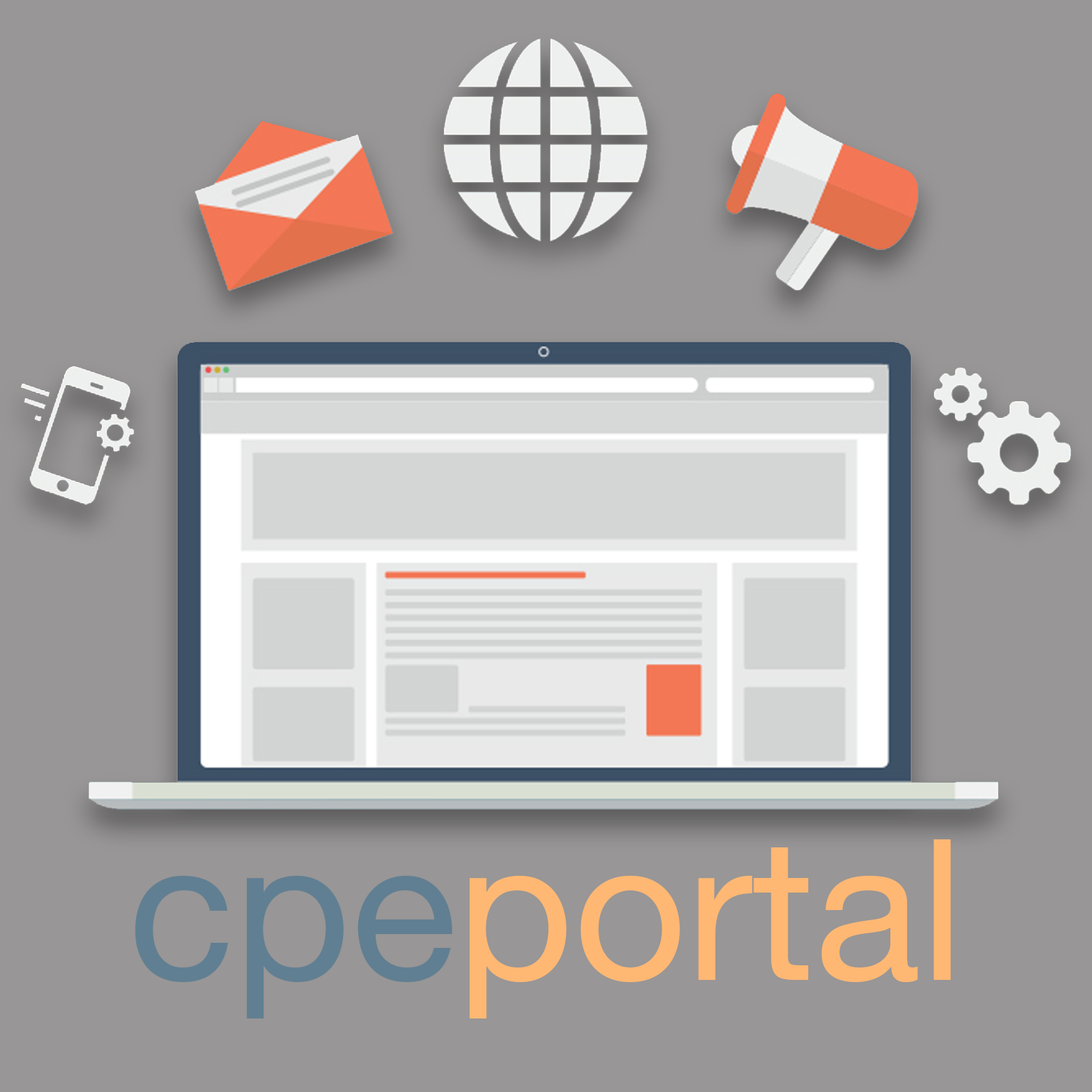
<style>
.page{position:relative;width:1092px;height:1092px;background:#989696}
.page>*{position:absolute;margin:0}
.t1{font:197.2px "HelveticaNeue";color:#ffb873}
.t2{font:197.2px "HelveticaNeue";color:#617f92}
</style>
<div class="page">
<p class="t1" style="left:135px;top:839px;width:816px;height:179px"><span class="t2">cpe</span>portal</p>
</div>
